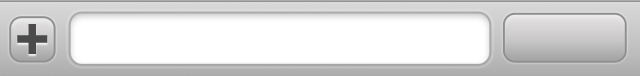
<style>
.page{position:relative;width:640px;height:76px;background:#ffffff}
.page>*{position:absolute;margin:0}
.t1{font:60px "Arial-BoldMT";color:#4b4b4b}
</style>
<div class="page">
<p class="t1" style="left:17px;top:24px;width:31px;height:30px">+</p>
</div>
